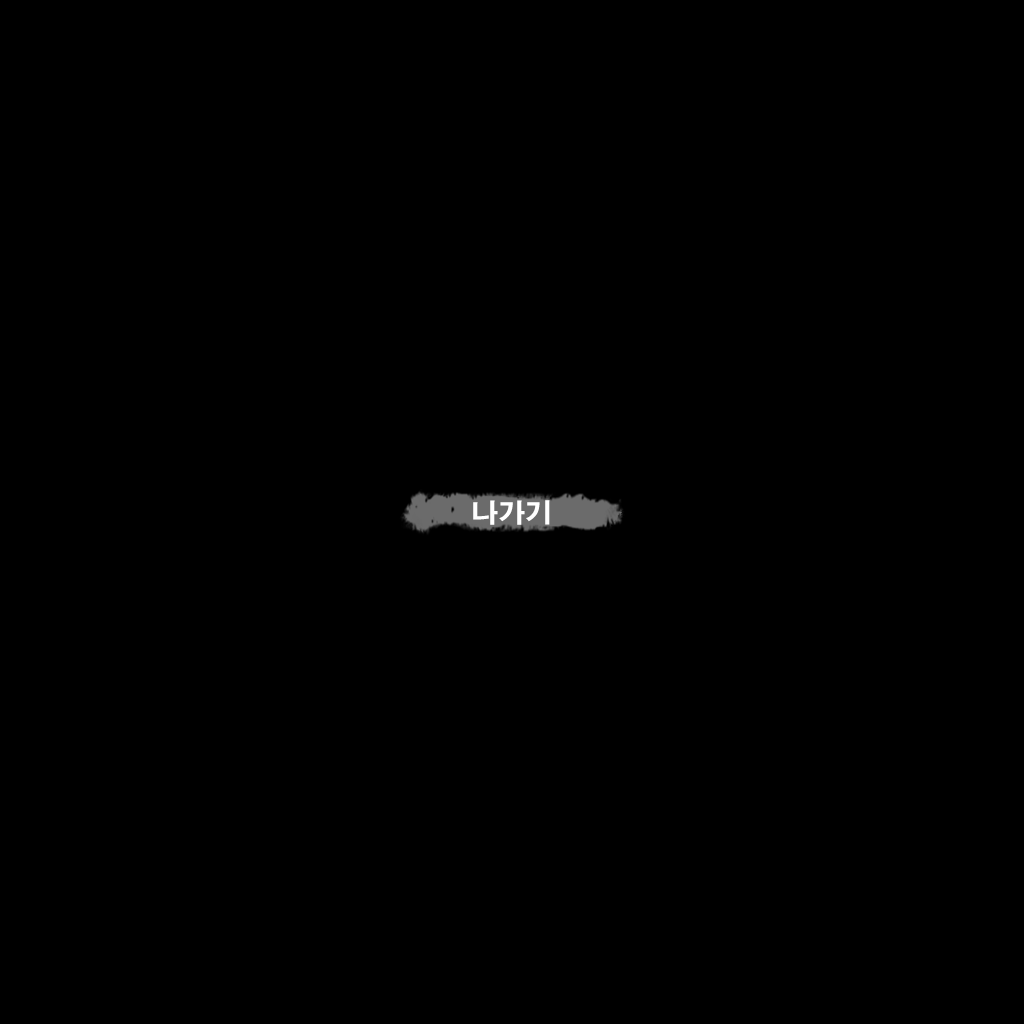
<style>
.page{position:relative;width:1024px;height:1024px;background:#000000}
.page>*{position:absolute;margin:0}
.t1{font:26px "HYgtrE";color:#ffffff;scale:1.04 1}
</style>
<div class="page">
<p class="t1" style="left:473px;top:500px;width:77px;height:25px">나가기</p>
</div>
